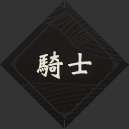
<style>
.page{position:relative;width:129px;height:129px;background:#333333}
.page>*{position:absolute;margin:0}
.t1{font:30px "WeibeiTC-Bold";color:#e8e3d6}
</style>
<div class="page">
<p class="t1" style="left:36px;top:51px;width:56px;height:28px">騎士</p>
</div>
